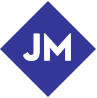
<style>
.page{position:relative;width:97px;height:98px;background:#ffffff}
.page>*{position:absolute;margin:0}
.t1{font:38px "NeutraText-Bold";color:#ffffff}
</style>
<div class="page">
<p class="t1" style="left:23px;top:34px;width:48px;height:27px">JM</p>
<p class="t1" style="left:23px;top:33px;width:48px;height:27px">JM</p>
</div>
